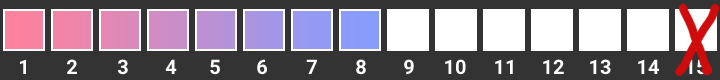
<style>
.page{position:relative;width:720px;height:80px;background:#333333}
.page>*{position:absolute;margin:0}
.t1{font:20px "Roboto-Bold";color:#fbfbfb}
.t2{font:20px "Roboto-Bold"}
</style>
<div class="page">
<p class="t1" style="left:19px;top:59px;width:8px;height:15px">1</p>
<p class="t1" style="left:66px;top:59px;width:11px;height:15px">2</p>
<p class="t1" style="left:117px;top:59px;width:11px;height:16px">3</p>
<p class="t1" style="left:165px;top:59px;width:12px;height:15px">4</p>
<p class="t1" style="left:210px;top:59px;width:10px;height:16px">5</p>
<p class="t1" style="left:257px;top:59px;width:11px;height:16px">6</p>
<p class="t1" style="left:306px;top:59px;width:11px;height:15px">7</p>
<p class="t1" style="left:356px;top:59px;width:10px;height:16px">8</p>
<p class="t1" style="left:404px;top:59px;width:10px;height:16px">9</p>
<p class="t1" style="left:445px;top:59px;width:21px;height:16px">10</p>
<p class="t1" style="left:495px;top:59px;width:18px;height:15px">11</p>
<p class="t1" style="left:543px;top:59px;width:21px;height:15px">12</p>
<p class="t1" style="left:590px;top:59px;width:21px;height:16px">13</p>
<p class="t1" style="left:638px;top:59px;width:21px;height:15px">14</p>
<p class="t2" style="left:686px;top:59px;width:21px;height:16px">15</p>
</div>
